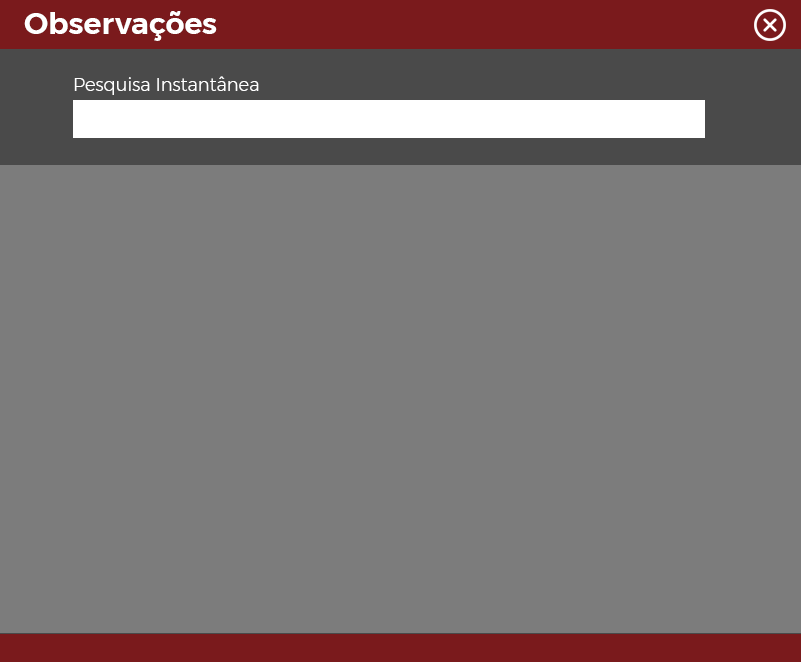
<style>
.page{position:relative;width:801px;height:662px;background:#7c7c7c}
.page>*{position:absolute;margin:0}
.t1{font:30px "Montserrat-SemiBold";color:#ffffff}
.t2{font:18px "Montserrat-Light";color:#ffffff}
</style>
<div class="page">
<p class="t1" style="left:24px;top:11px;width:193px;height:30px">Observações</p>
<p class="t2" style="left:74px;top:76px;width:185px;height:19px">Pesquisa Instantânea</p>
</div>
